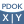
<style>
.page{position:relative;width:24px;height:24px;background:#466991}
.page>*{position:absolute;margin:0}
.t1{font:7.2px "AvenirNext-DemiBold";color:#466991}
.t2{font:9.6px "AvenirNext-DemiBold";color:#ffffff}
</style>
<div class="page">
<p class="t1" style="left:2px;top:3px;width:21px;height:6px">PDOK</p>
<p class="t2" style="left:2px;top:14px;width:20px;height:10px">X | Y</p>
</div>
